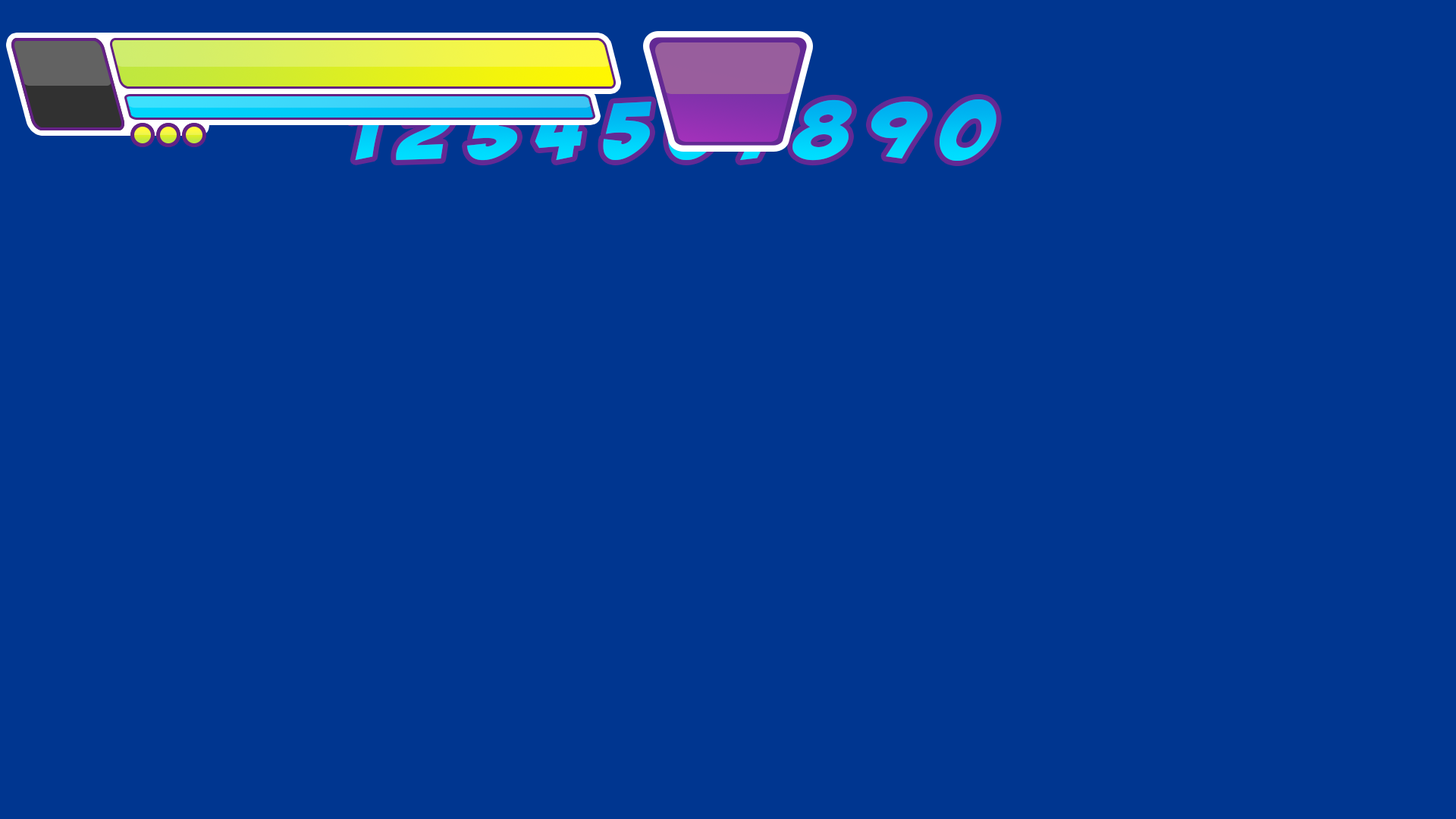
<style>
.page{position:relative;width:1456px;height:819px;background:#003690}
.page>*{position:absolute;margin:0}
.t1{font:78.8px "BadaBoomBB";scale:1.32 1}
</style>
<div class="page">
<p class="t1" style="left:350px;top:99px;width:646px;height:62px">1 2 3 4 5 6 7 8 9 0</p>
</div>
